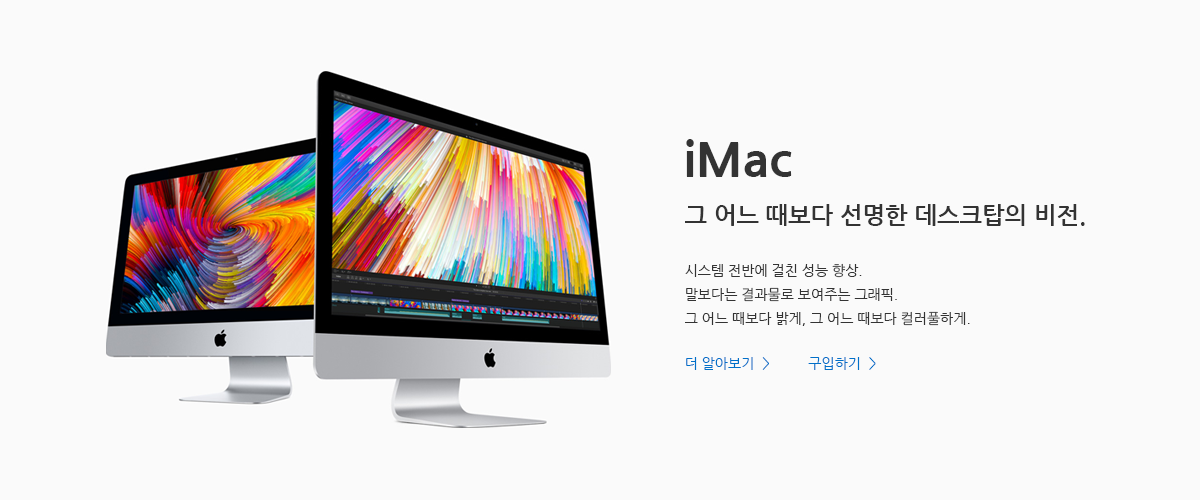
<style>
.page{position:relative;width:1200px;height:500px;background:#fafafa}
.page>*{position:absolute;margin:0}
.t1{font:24px/48px "NanumGothicBold";color:#333333}
.t2{font:48px/48px "NanumGothicExtraBold";color:#333333}
.t3{font:14px/24px "NanumGothic";color:#333333}
.t4{font:14px "NanumGothic";color:#0070c9}
</style>
<div class="page">
<p class="t1" style="left:685px;top:139px;width:400px;height:87px"><span class="t2">iMac<br></span>그 어느 때보다 선명한 데스크탑의 비전.</p>
<p class="t3" style="left:685px;top:263px;width:285px;height:63px">시스템 전반에 걸친 성능 향상.<br>말보다는 결과물로 보여주는 그래픽.<br>그 어느 때보다 밝게, 그 어느 때보다 컬러풀하게.</p>
<p class="t4" style="left:686px;top:357px;width:190px;height:13px">더 알아보기  &gt;     구입하기  &gt;</p>
</div>
